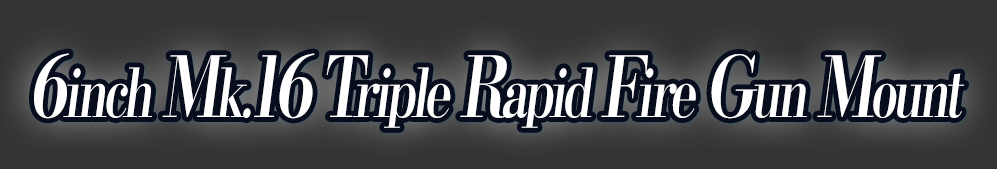
<style>
.page{position:relative;width:997px;height:169px;background:#333333}
.page>*{position:absolute;margin:0}
.t1{font:67.2px "KochoStd-Heavy";letter-spacing:-0.08em;color:#ffffff;font-style:italic;scale:0.73 1}
.t2{font:84px "KochoStd-Heavy";letter-spacing:-0.08em;color:#ffffff;font-style:italic;scale:0.73 1}
</style>
<div class="page">
<p class="t1" style="left:34px;top:53px;width:931px;height:75px"><span class="t2">6</span>inch <span class="t2">M</span>k.<span class="t2">16 T</span>riple <span class="t2">R</span>apid <span class="t2">F</span>ire <span class="t2">G</span>un <span class="t2">M</span>ount</p>
</div>
